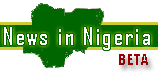
<style>
.page{position:relative;width:158px;height:73px;background:#ffffff}
.page>*{position:absolute;margin:0}
.t1{font:24px "AgencyFB-Reg";letter-spacing:0.1em;color:#ffffff}
.t2{font:14px "Impact";letter-spacing:0.1em;color:#990000}
</style>
<div class="page">
<p class="t1" style="left:4px;top:27px;width:146px;height:23px">News in Nigeria</p>
<p class="t2" style="left:119px;top:54px;width:29px;height:11px">BETA</p>
</div>
